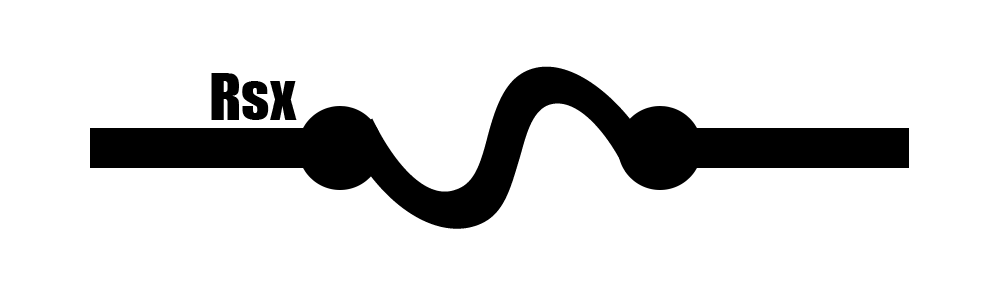
<style>
.page{position:relative;width:1000px;height:300px;background:#ffffff}
.page>*{position:absolute;margin:0}
.t1{font:60px "Impact";color:#000000}
.t2{font:400px "LithosPro-Regular";color:#000000}
</style>
<div class="page">
<p class="t1" style="left:211px;top:73px;width:86px;height:47px">Rsx</p>
<p class="t2" style="left:345px;top:66px;width:309px;height:163px;rotate:76deg">S</p>
</div>
